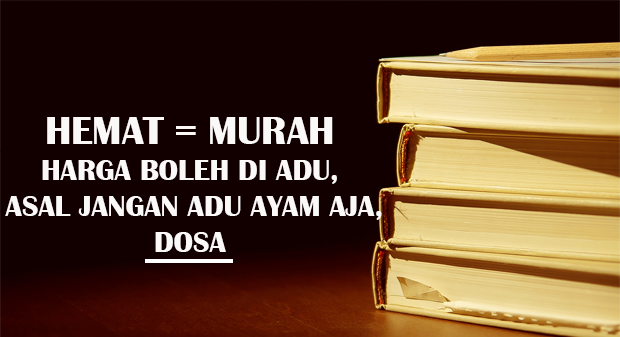
<style>
.page{position:relative;width:620px;height:337px;background:#120000}
.page>*{position:absolute;margin:0}
.t1{font:30px "BritannicBold";color:#fbf8f8}
.t2{font:40px "BritannicBold";color:#fbf8f8}
</style>
<div class="page">
<p class="t1" style="left:5px;top:117px;width:377px;height:135px;text-align:center"><span class="t2">HEMAT = MURAH<br></span>HARGA BOLEH DI ADU,<br> ASAL JANGAN ADU AYAM AJA,<br>DOSA</p>
</div>
